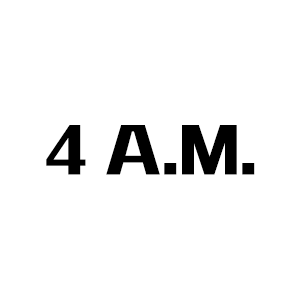
<style>
.page{position:relative;width:300px;height:300px;background:#ffffff}
.page>*{position:absolute;margin:0}
.t1{font:65px "MStiffHeiHKS-UltraBold";color:#000000}
</style>
<div class="page">
<p class="t1" style="left:46px;top:125px;width:209px;height:50px">4 A.M.</p>
</div>
